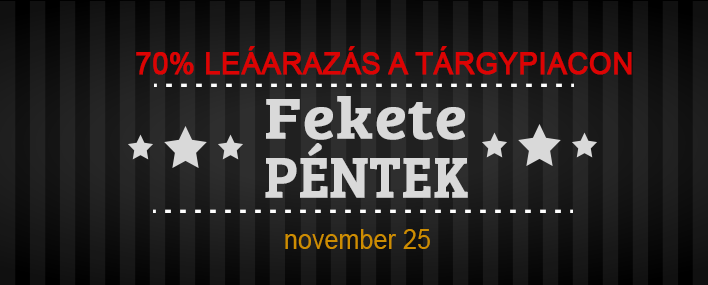
<style>
.page{position:relative;width:708px;height:285px}
.page>*{position:absolute;margin:0}
.t1{font:31.2px "ArialMT";color:#dc0303;font-weight:bold;scale:0.92 1}
.t2{font:59.2px "BreeSerif-Regular";color:#d9d9d9;font-weight:bold;scale:1.11 1}
.t3{font:59.2px "BreeSerif-Regular";color:#d9d9d9;font-weight:bold;scale:0.92 1}
.t4{font:27.2px "ArialMT";color:#cd8d02;scale:0.92 1}
</style>
<div class="page">
<p class="t1" style="left:136px;top:46px;width:496px;height:29px">70% LEÁARAZÁS A TÁRGYPIACON</p>
<p class="t2" style="left:265px;top:96px;width:203px;height:102px">Fekete<br><span class="t3">PÉNTEK</span></p>
<p class="t4" style="left:285px;top:229px;width:145px;height:20px">november 25</p>
</div>
